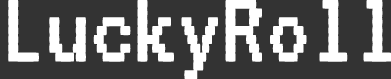
<style>
.page{position:relative;width:391px;height:79px;background:#333333}
.page>*{position:absolute;margin:0}
.t1{font:106px "VT323-Regular";color:#ffffff}
</style>
<div class="page">
<p class="t1" style="left:8px;top:0px;width:384px;height:80px">LuckyRoll</p>
</div>
